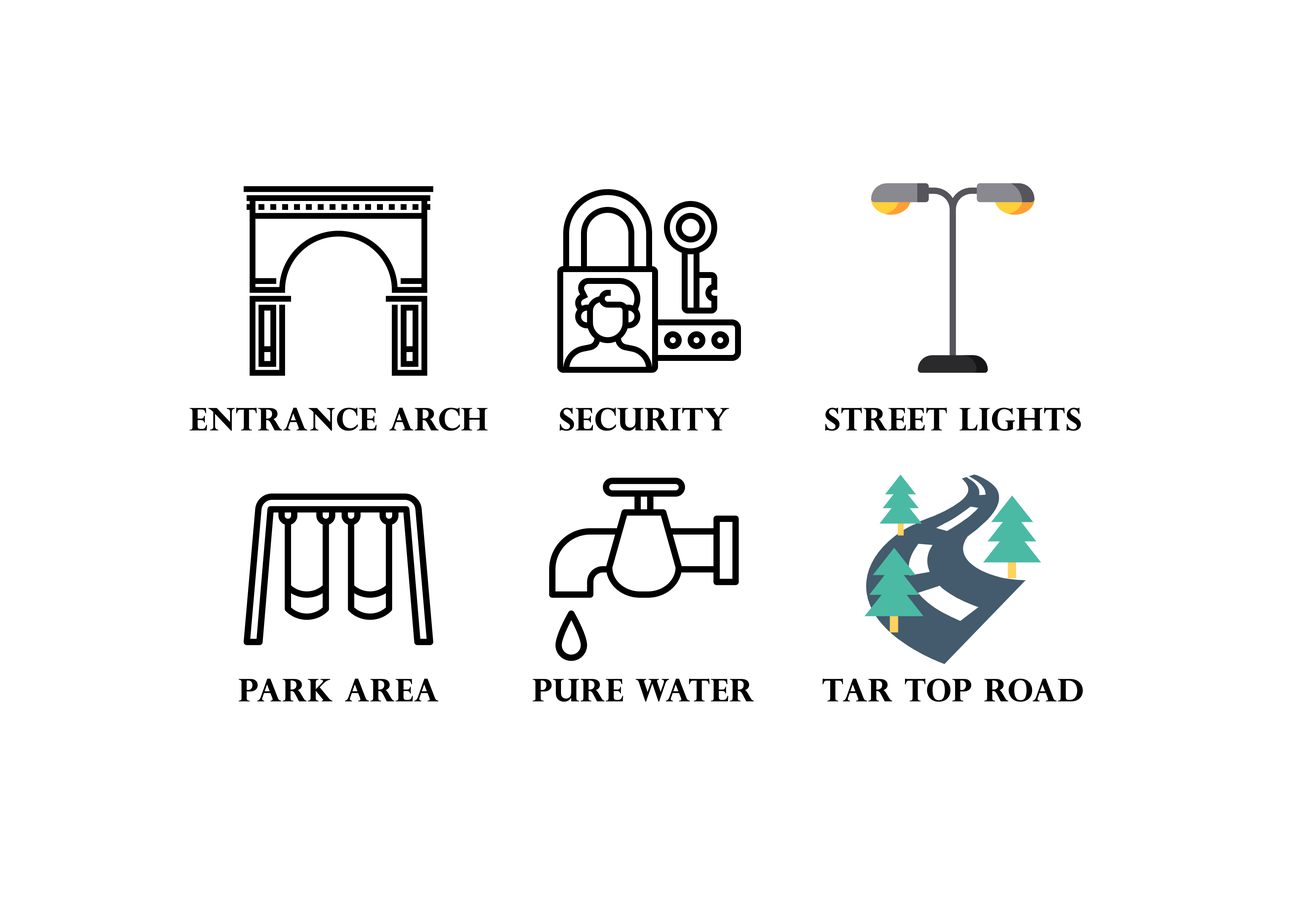
<style>
.page{position:relative;width:1299px;height:918px;background:#ffffff}
.page>*{position:absolute;margin:0}
.t1{font:30.9px "PerpetuaTitlingMT-Bold";color:#000000;font-weight:bold}
</style>
<div class="page">
<p class="t1" style="left:190px;top:408px;width:298px;height:23px">ENTRANCE ARCH</p>
<p class="t1" style="left:559px;top:408px;width:170px;height:23px">SECURITY</p>
<p class="t1" style="left:825px;top:408px;width:256px;height:23px">STREET LIGHTS</p>
<p class="t1" style="left:238px;top:679px;width:200px;height:23px">PARK AREA</p>
<p class="t1" style="left:532px;top:679px;width:222px;height:23px">PURE WATER</p>
<p class="t1" style="left:822px;top:679px;width:261px;height:23px">TAR TOP ROAD</p>
</div>
